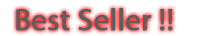
<style>
.page{position:relative;width:219px;height:36px;background:#ffffff}
.page>*{position:absolute;margin:0}
.t1{font:30px "MyriadPro-Regular";color:#5e5e5e;font-weight:bold}
</style>
<div class="page">
<p class="t1" style="left:16px;top:8px;width:157px;height:23px">Best Seller !!</p>
</div>
